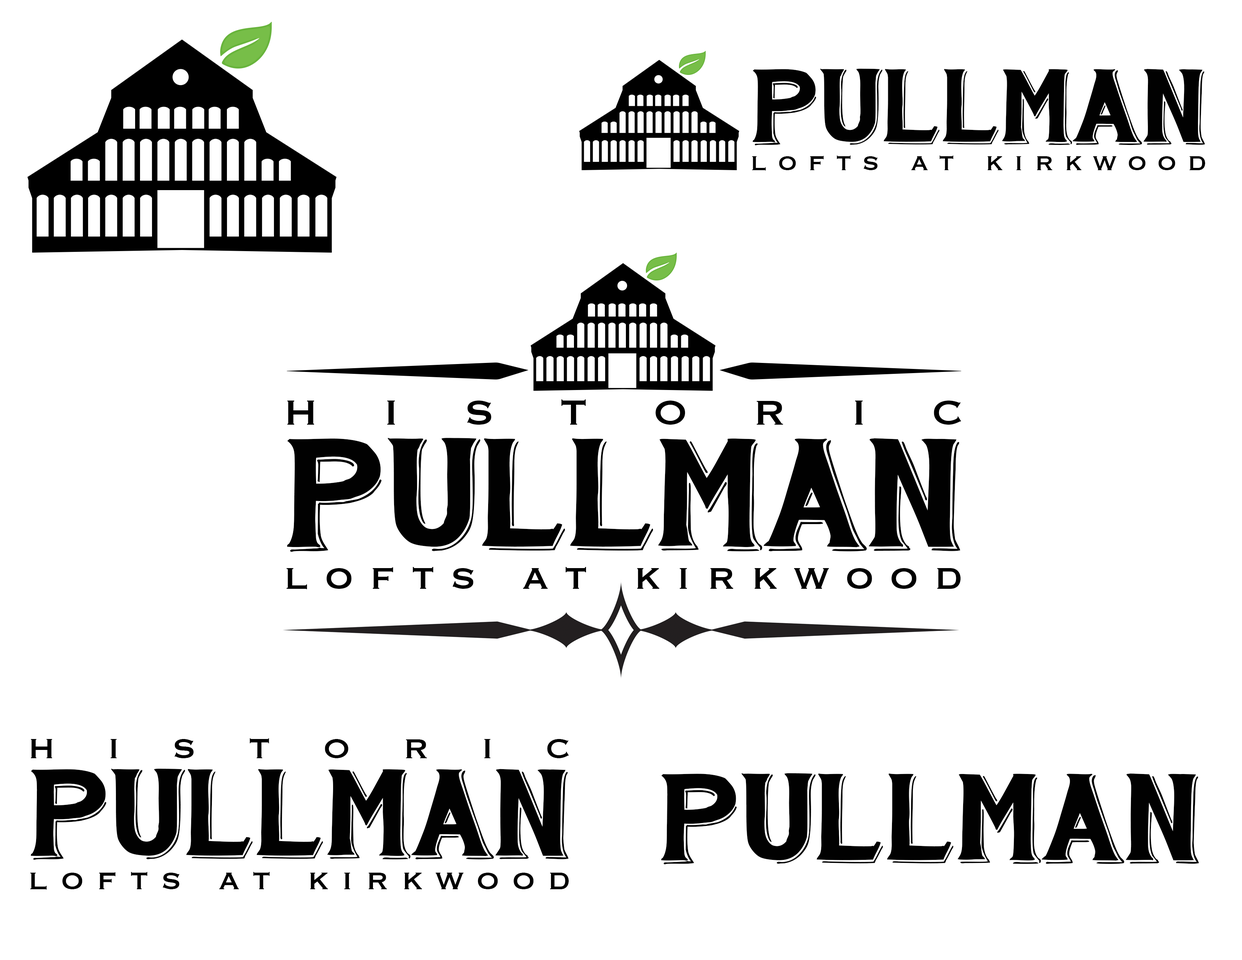
<style>
.page{position:relative;width:1242px;height:960px;background:#ffffff}
.page>*{position:absolute;margin:0}
.t1{font:103.4px "HandShopTypographyC30_demo";color:#010101}
.t2{font:31.4px "Copperplate";letter-spacing:0.34em;color:#000000}
.t3{font:45.4px "Copperplate";letter-spacing:1.44em;color:#000000}
.t4{font:154px "HandShopTypographyC30_demo";color:#010101}
.t5{font:46.7px "Copperplate";letter-spacing:0.34em;color:#000000}
.t6{font:36.3px "Copperplate";letter-spacing:1.44em;color:#000000}
.t7{font:123px "HandShopTypographyC30_demo";color:#010101}
.t8{font:37.3px "Copperplate";letter-spacing:0.34em;color:#000000}
</style>
<div class="page">
<p class="t1" style="left:752px;top:69px;width:453px;height:76px">PULLMAN</p>
<p class="t2" style="left:752px;top:155px;width:453px;height:16px">lofts at kirkwood</p>
<p class="t3" style="left:287px;top:399px;width:674px;height:26px">HISTORIC</p>
<p class="t4" style="left:287px;top:437px;width:674px;height:115px">PULLMAN</p>
<p class="t5" style="left:286px;top:567px;width:675px;height:22px">lofts at kirkwood</p>
<p class="t6" style="left:31px;top:738px;width:538px;height:20px">HISTORIC</p>
<p class="t7" style="left:30px;top:768px;width:539px;height:92px">PULLMAN</p>
<p class="t7" style="left:661px;top:773px;width:538px;height:91px">PULLMAN</p>
<p class="t8" style="left:30px;top:872px;width:539px;height:18px">lofts at kirkwood</p>
</div>
